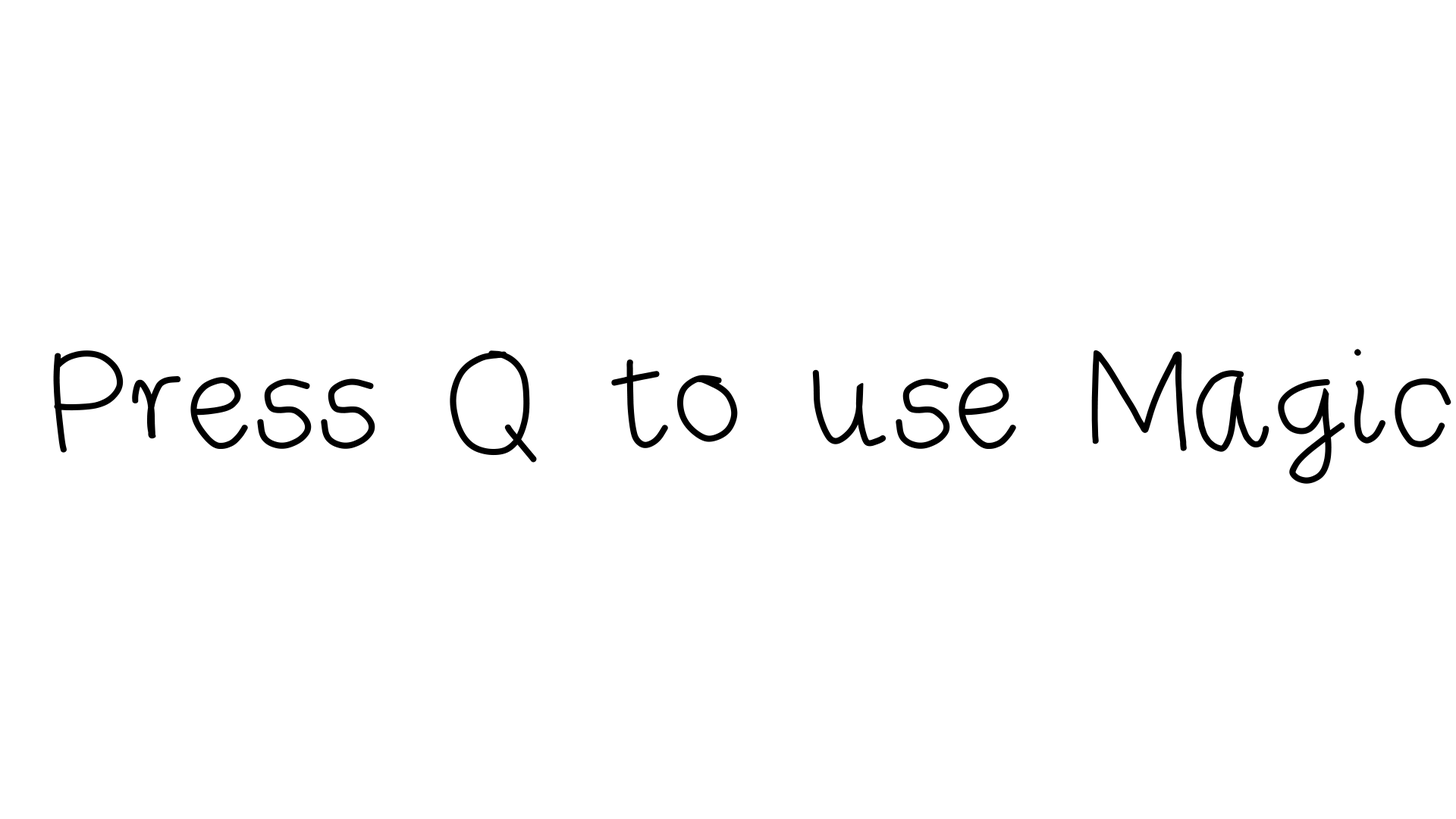
<style>
.page{position:relative;width:1456px;height:819px;background:#ffffff}
.page>*{position:absolute;margin:0}
.t1{font:151.7px "RiseStarHand";color:#000000}
</style>
<div class="page">
<p class="t1" style="left:53px;top:349px;width:1398px;height:135px">Press Q to use Magic</p>
</div>
